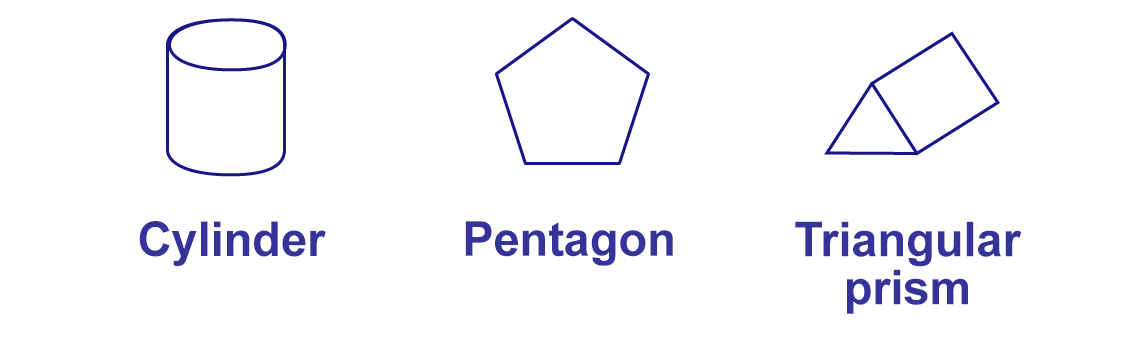
<style>
.page{position:relative;width:1134px;height:340px;background:#ffffff}
.page>*{position:absolute;margin:0}
.t1{font:48px "Arial-BoldMT";color:#333399}
.t2{font:48px/48px "Arial-BoldMT";color:#333399}
</style>
<div class="page">
<p class="t1" style="left:139px;top:221px;width:187px;height:45px">Cylinder</p>
<p class="t1" style="left:465px;top:221px;width:208px;height:45px">Pentagon</p>
<p class="t2" style="left:795px;top:221px;width:227px;height:93px;text-align:center">Triangular<br>prism</p>
</div>
